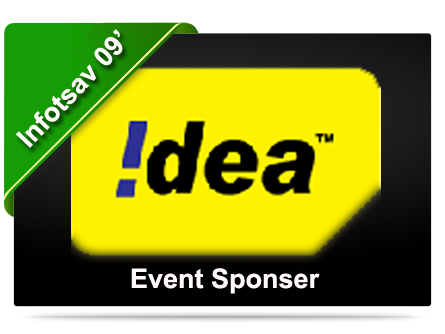
<style>
.page{position:relative;width:445px;height:334px;background:#fff200}
.page>*{position:absolute;margin:0}
.t1{font:27px "Arial-BoldMT";color:#fff9fa}
</style>
<div class="page">
<p class="t1" style="left:16px;top:29px;width:107px;height:119px;rotate:-47deg">Infotsav 09’</p>
<p class="t1" style="left:131px;top:268px;width:189px;height:26px">Event Sponser</p>
</div>
